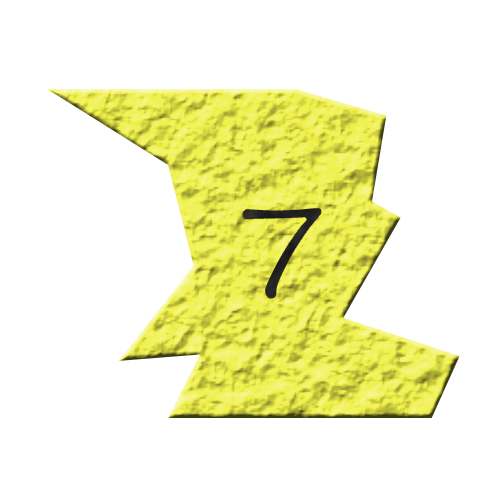
<style>
.page{position:relative;width:500px;height:500px;background:#ffffff}
.page>*{position:absolute;margin:0}
.t1{font:140px "SegoeScript";color:#242424}
</style>
<div class="page">
<p class="t1" style="left:241px;top:207px;width:82px;height:93px">7</p>
</div>
